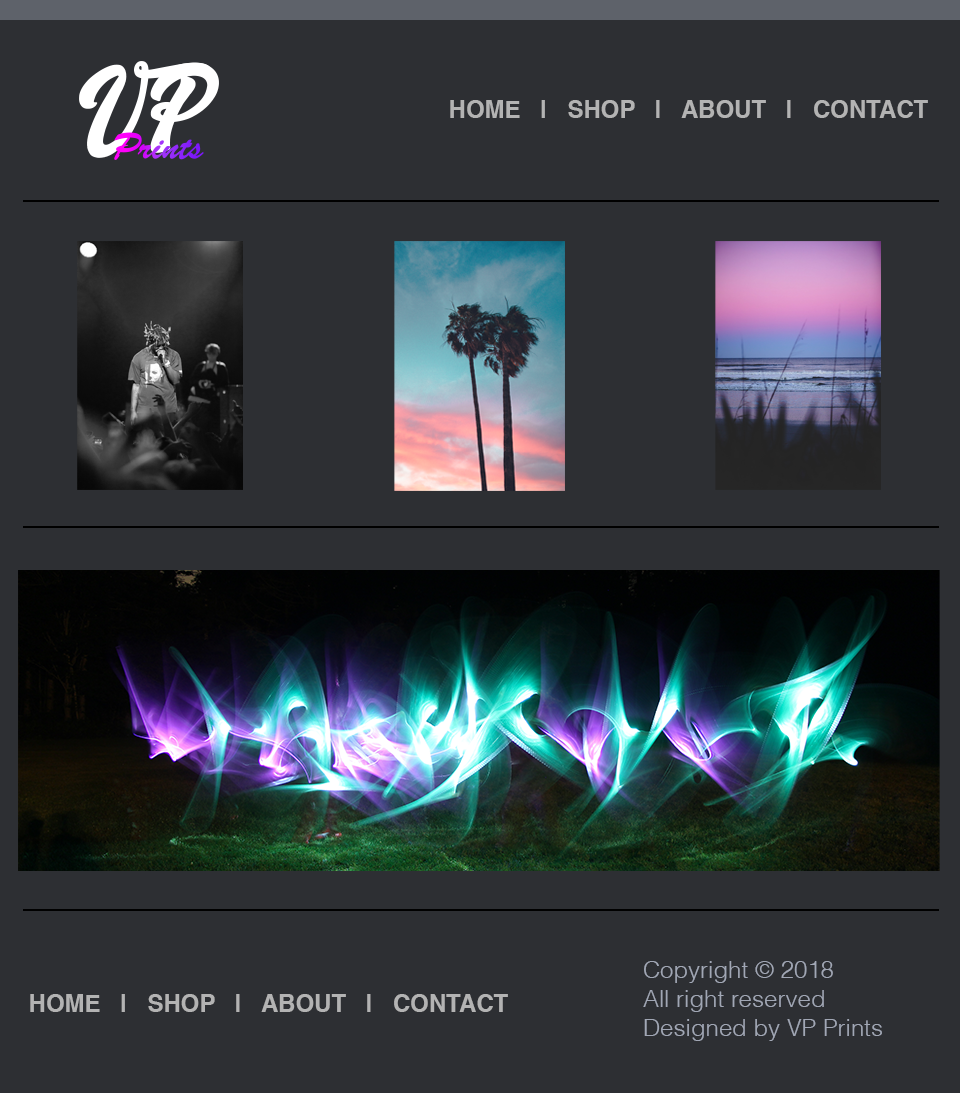
<style>
.page{position:relative;width:960px;height:1093px;background:#2d2f33}
.page>*{position:absolute;margin:0}
.t1{font:24px "Helvetica-Bold";color:#b3b3b3}
.t2{font:24px "Helvetica-Light";color:#a1a7b5}
</style>
<div class="page">
<p class="t1" style="left:450px;top:100px;width:478px;height:18px">HOME   |   SHOP   |   ABOUT   |   CONTACT</p>
<p class="t2" style="left:643px;top:961px;width:239px;height:80px">Copyright © 2018 <br>All right reserved <br>Designed by VP Prints</p>
<p class="t1" style="left:30px;top:994px;width:478px;height:18px">HOME   |   SHOP   |   ABOUT   |   CONTACT</p>
</div>
